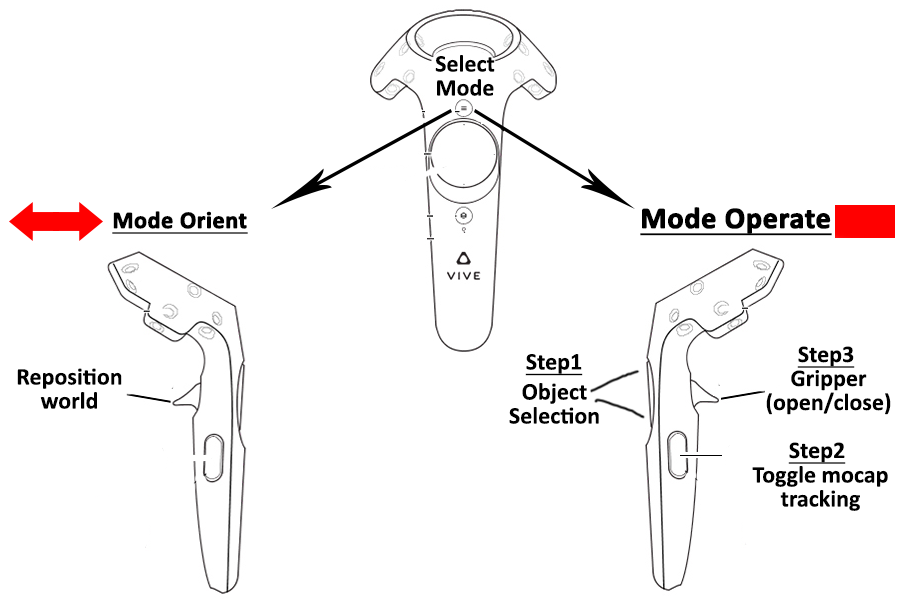
<style>
.page{position:relative;width:900px;height:600px;background:#ffffff}
.page>*{position:absolute;margin:0}
.t1{font:24px/24px "Calibri-Bold";color:#000000}
.t2{font:30px "Calibri-Bold";color:#000000;font-weight:bold;text-decoration:underline}
.t3{font:24px "Calibri-Bold";color:#000000;font-weight:bold;text-decoration:underline}
.t4{font:24px "Calibri-Bold";color:#000000;text-decoration:underline}
</style>
<div class="page">
<p class="t1" style="left:435px;top:55px;width:60px;height:41px;text-align:center">Select<br>Mode</p>
<p class="t2" style="left:640px;top:207px;width:192px;height:29px">Mode Operate</p>
<p class="t3" style="left:112px;top:211px;width:136px;height:23px">Mode Orient</p>
<p class="t4" style="left:797px;top:346px;width:58px;height:22px">Step3</p>
<p class="t4" style="left:525px;top:354px;width:58px;height:22px">Step1</p>
<p class="t1" style="left:17px;top:368px;width:105px;height:41px;text-align:center">Reposition<br>world</p>
<p class="t1" style="left:766px;top:370px;width:125px;height:45px;text-align:center">Gripper<br>(open/close)</p>
<p class="t1" style="left:509px;top:383px;width:90px;height:41px;text-align:center">Object<br>Selection</p>
<p class="t4" style="left:788px;top:442px;width:58px;height:22px">Step2</p>
<p class="t1" style="left:752px;top:466px;width:136px;height:45px;text-align:center">Toggle mocap<br>tracking</p>
</div>
